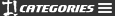
<style>
.page{position:relative;width:115px;height:16px;background:#333333}
.page>*{position:absolute;margin:0}
.t1{font:15.6px "Motorwerk";color:#ffffff}
</style>
<div class="page">
<p class="t1" style="left:19px;top:5px;width:76px;height:8px">Categories</p>
</div>
